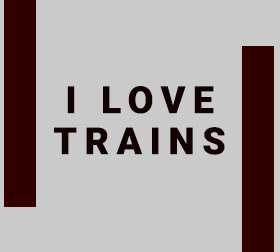
<style>
.page{position:relative;width:280px;height:252px;background:#cacaca}
.page>*{position:absolute;margin:0}
.t1{font:37.5px/41.1px "Roboto-Black";letter-spacing:0.2em;color:#120202;text-transform:uppercase}
</style>
<div class="page">
<p class="t1" style="left:54px;top:86px;width:171px;height:69px;text-align:center">I love trains</p>
</div>
